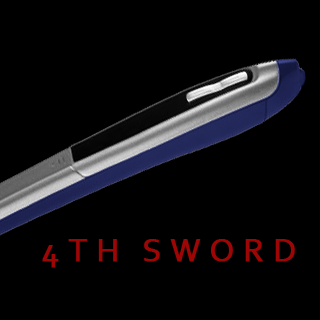
<style>
.page{position:relative;width:320px;height:320px;background:#000000}
.page>*{position:absolute;margin:0}
.t1{font:34px "Corbel";letter-spacing:0.24em;color:#9e0606;font-weight:bold}
</style>
<div class="page">
<p class="t1" style="left:42px;top:239px;width:253px;height:29px">4TH SWORD</p>
</div>
